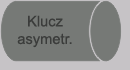
<style>
.page{position:relative;width:130px;height:70px;background:#767976}
.page>*{position:absolute;margin:0}
.t1{font:14.7px "ArialMT";color:#3b3c3b}
</style>
<div class="page">
<p class="t1" style="left:17px;top:15px;width:55px;height:33px;text-align:center">Klucz<br>asymetr.</p>
</div>
